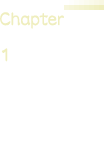
<style>
.page{position:relative;width:104px;height:160px;background:#ffffff}
.page>*{position:absolute;margin:0}
.t1{font:24.2px/24px "DFLeiShoStd-W5";letter-spacing:-0.025em;color:#efeebe;scale:0.83 1}
.t2{font:24.2px/36px "DFLeiShoStd-W5";letter-spacing:-0.025em;color:#efeebe;scale:0.83 1}
</style>
<div class="page">
<p class="t1" style="left:0px;top:12px;width:64px;height:50px">Chapter<br><span class="t2">1</span></p>
</div>
